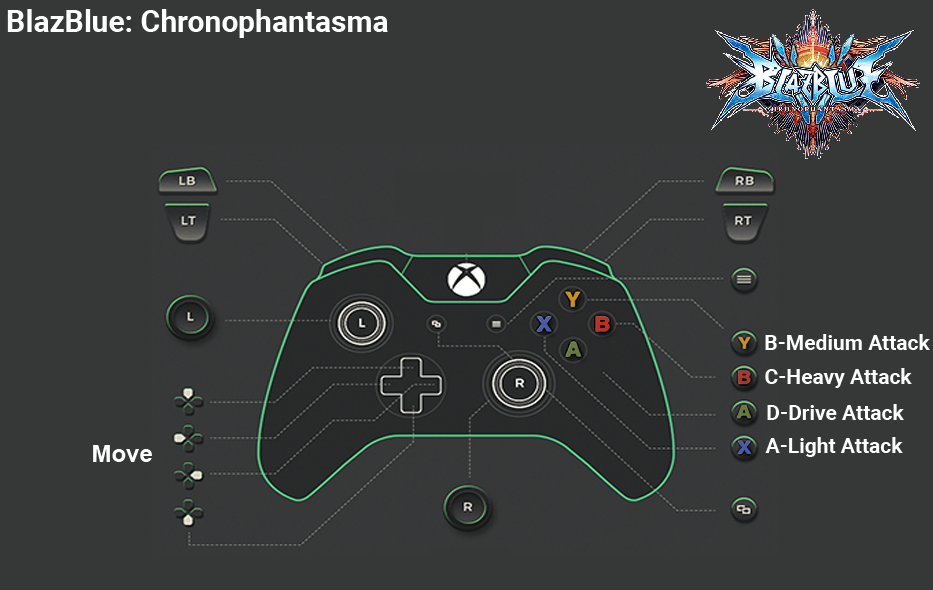
<style>
.page{position:relative;width:933px;height:590px;background:#363838}
.page>*{position:absolute;margin:0}
.t1{font:30px "Roboto-Bold";color:#ffffff}
.t2{font:21px "Roboto-Bold";color:#ffffff}
.t3{font:24px "Arial-BoldMT";color:#fefefe}
</style>
<div class="page">
<p class="t1" style="left:7px;top:9px;width:381px;height:29px">BlazBlue: Chronophantasma</p>
<p class="t2" style="left:765px;top:334px;width:165px;height:16px">B-Medium Attack</p>
<p class="t2" style="left:765px;top:368px;width:147px;height:20px">C-Heavy Attack</p>
<p class="t2" style="left:767px;top:404px;width:137px;height:16px">D-Drive Attack</p>
<p class="t2" style="left:765px;top:437px;width:138px;height:20px">A-Light Attack</p>
<p class="t3" style="left:93px;top:445px;width:59px;height:17px">Move</p>
</div>
